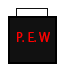
<style>
.page{position:relative;width:64px;height:64px;background:#111111}
.page>*{position:absolute;margin:0}
.t1{font:12px "KozGoPr6N-Regular";color:#ff0000}
</style>
<div class="page">
<p class="t1" style="left:17px;top:32px;width:33px;height:10px">P. E. W</p>
</div>
